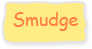
<style>
.page{position:relative;width:92px;height:49px;background:#ffec84}
.page>*{position:absolute;margin:0}
.t1{font:18px "ComicSansMS";color:#ff8047}
</style>
<div class="page">
<p class="t1" style="left:13px;top:12px;width:65px;height:19px">Smudge</p>
</div>
